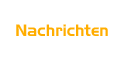
<style>
.page{position:relative;width:123px;height:60px;background:#ffffff}
.page>*{position:absolute;margin:0}
.t1{font:16px "AeroRegularSWFTE";color:#ffad00}
</style>
<div class="page">
<p class="t1" style="left:16px;top:24px;width:92px;height:12px">Nachrichten</p>
</div>
